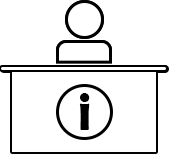
<style>
.page{position:relative;width:169px;height:154px;background:#ffffff}
.page>*{position:absolute;margin:0}
.t1{font:54.7px "BerlinSansFBDemi-Bold";color:#000000;scale:0.88 1}
</style>
<div class="page">
<p class="t1" style="left:79px;top:93px;width:11px;height:37px">i</p>
</div>
